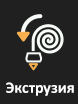
<style>
.page{position:relative;width:78px;height:104px;background:#202020}
.page>*{position:absolute;margin:0}
.t1{font:12px "Calibri-Bold";color:#ffffff}
</style>
<div class="page">
<p class="t1" style="left:6px;top:82px;width:68px;height:14px">Экструзия</p>
</div>
